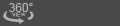
<style>
.page{position:relative;width:120px;height:26px;background:#484949}
.page>*{position:absolute;margin:0}
.t1{font:11.9px "ArialMT";color:#c0c0c0}
</style>
<div class="page">
<p class="t1" style="left:9px;top:3px;width:24px;height:9px">360°</p>
</div>
